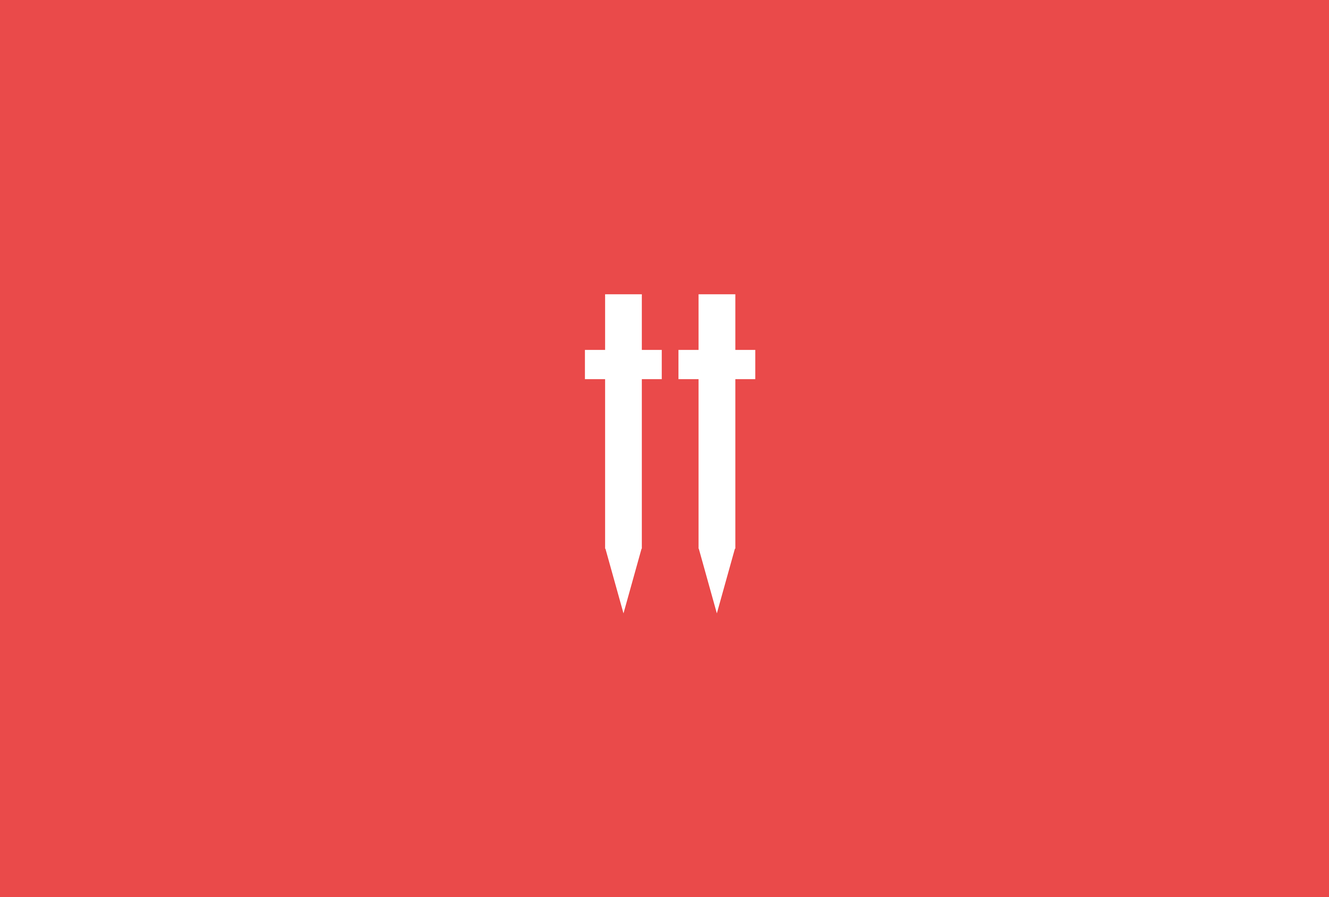
<style>
.page{position:relative;width:1329px;height:897px;background:#ea4a4a}
.page>*{position:absolute;margin:0}
.t1{font:393.1px "Futura-CondensedMedium";letter-spacing:0.01em;color:#ffffff}
</style>
<div class="page">
<p class="t1" style="left:585px;top:294px;width:171px;height:255px">tt</p>
</div>
